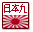
<style>
.page{position:relative;width:33px;height:32px;background:#ffffff}
.page>*{position:absolute;margin:0}
.t1{font:10.4px "SimSun";letter-spacing:-0.25em;color:#ae0012}
</style>
<div class="page">
<p class="t1" style="left:4px;top:4px;width:23px;height:9px">日本九</p>
</div>
